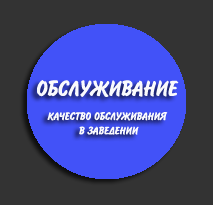
<style>
.page{position:relative;width:213px;height:205px;background:#333333}
.page>*{position:absolute;margin:0}
.t1{font:24px "DomCasualNormal";color:#fafafd;text-transform:uppercase;font-style:italic;scale:1.1 1}
.t2{font:12px "DomCasualNormal";color:#fafafd;text-transform:uppercase;font-style:italic;scale:1.1 1}
</style>
<div class="page">
<p class="t1" style="left:37px;top:80px;width:142px;height:17px">ОБслуживание</p>
<p class="t2" style="left:47px;top:112px;width:121px;height:23px;text-align:center">качество обслуживания <br>в заведении</p>
</div>
